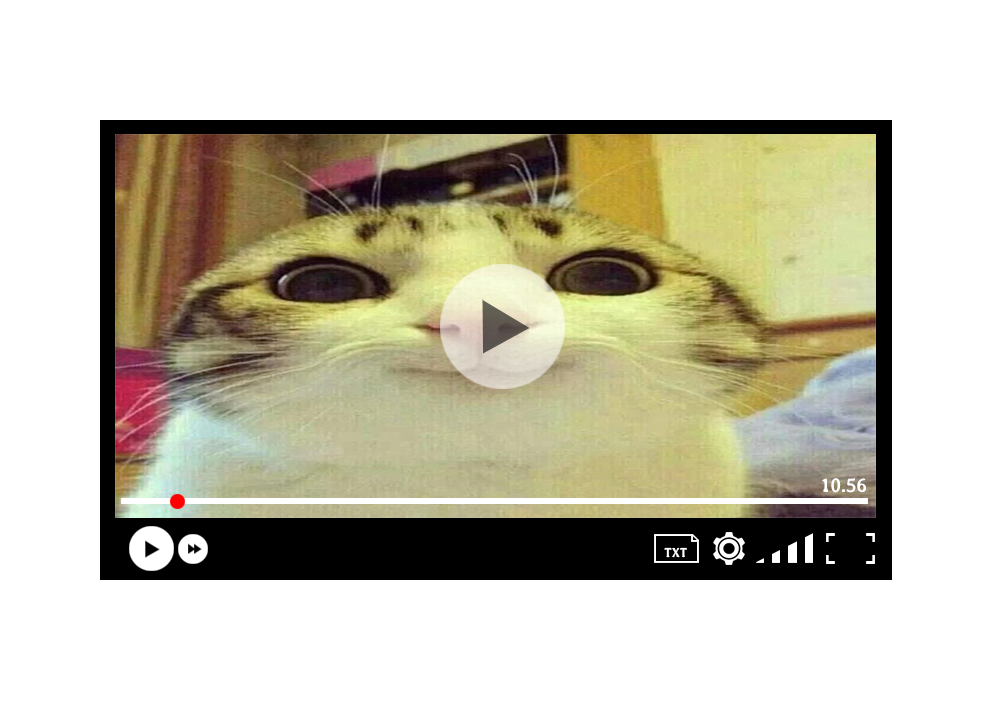
<style>
.page{position:relative;width:996px;height:715px;background:#ffffff}
.page>*{position:absolute;margin:0}
.t1{font:20px "Averia-Bold";letter-spacing:-0.04em;color:#ffffff}
.t2{font:13px "Averia-Bold";letter-spacing:-0.04em;color:#ffffff}
</style>
<div class="page">
<p class="t1" style="left:822px;top:478px;width:44px;height:15px">10.56</p>
<p class="t2" style="left:664px;top:547px;width:23px;height:11px">TXT</p>
</div>
